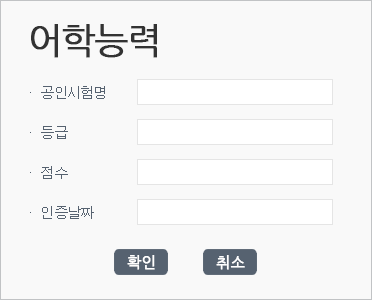
<style>
.page{position:relative;width:372px;height:300px;background:#f9f9f9}
.page>*{position:absolute;margin:0}
.t1{font:36px "NanumGothic";letter-spacing:-0.05em;color:#333333;font-weight:bold}
.t2{font:14px/40px "Dotum";letter-spacing:-0.05em;color:#566270}
.t3{font:15px "NanumGothic";color:#ffffff;font-weight:bold}
</style>
<div class="page">
<p class="t1" style="left:31px;top:24px;width:126px;height:34px">어학능력</p>
<p class="t2" style="left:30px;top:86px;width:75px;height:133px">·  공인시험명<br>·  등급<br>·  점수<br>·  인증날짜</p>
<p class="t3" style="left:127px;top:255px;width:28px;height:15px">확인</p>
<p class="t3" style="left:216px;top:255px;width:29px;height:15px">취소</p>
</div>
